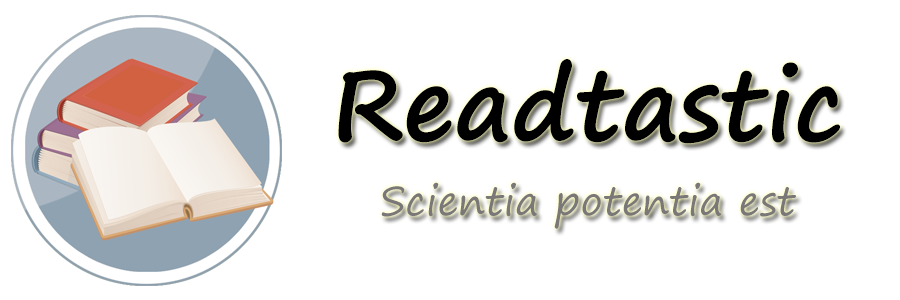
<style>
.page{position:relative;width:900px;height:300px;background:#ffffff}
.page>*{position:absolute;margin:0}
.t1{font:98px "SegoePrint-Bold";color:#000000}
.t2{font:40px "SegoePrint";color:#797777}
</style>
<div class="page">
<p class="t1" style="left:338px;top:59px;width:502px;height:85px">Readtastic</p>
<p class="t2" style="left:381px;top:182px;width:415px;height:47px">Scientia potentia est</p>
</div>
